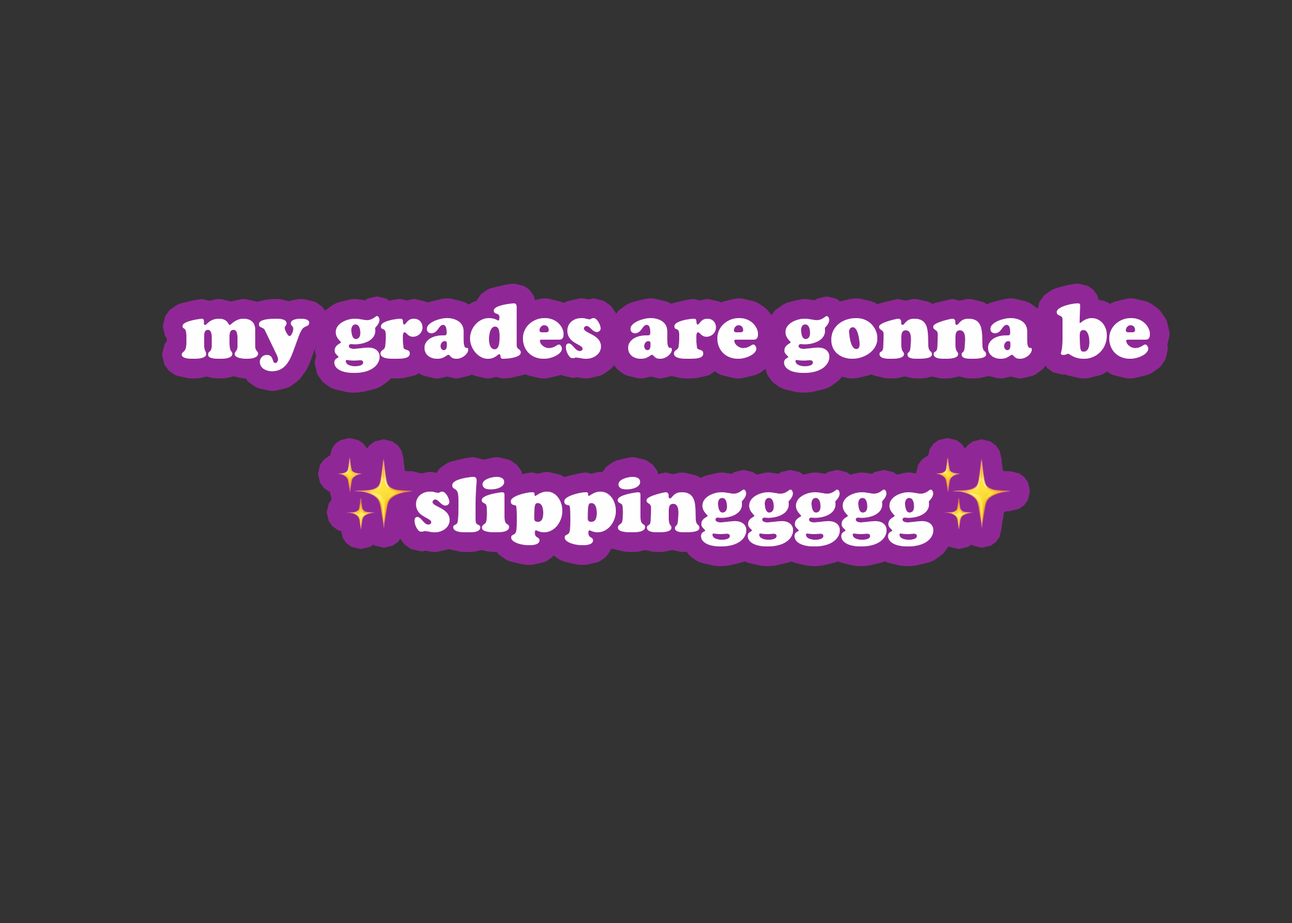
<style>
.page{position:relative;width:1292px;height:923px;background:#333333}
.page>*{position:absolute;margin:0}
.t1{font:76.9px "CooperBlackStd";color:#fffefe}
.t2{font:76.9px "AppleColorEmoji";color:#fffefe}
</style>
<div class="page">
<p class="t1" style="left:182px;top:303px;width:968px;height:70px">my grades are gonna be</p>
<p class="t1" style="left:337px;top:457px;width:674px;height:89px"><span class="t2">✨</span>slippinggggg<span class="t2">✨</span></p>
</div>
